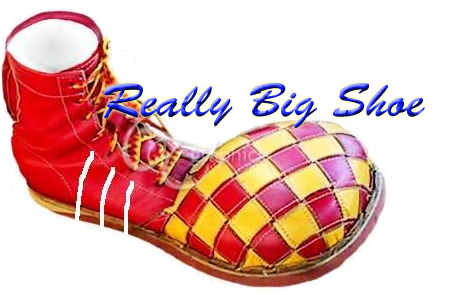
<style>
.page{position:relative;width:450px;height:295px;background:#ffffff}
.page>*{position:absolute;margin:0}
.t1{font:48px "BrushScriptStd"}
</style>
<div class="page">
<p class="t1" style="left:104px;top:82px;width:321px;height:46px">Really Big Shoe</p>
</div>
